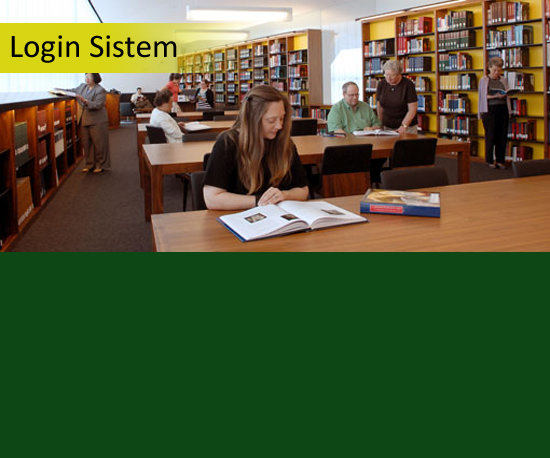
<style>
.page{position:relative;width:550px;height:458px;background:#0e4716}
.page>*{position:absolute;margin:0}
.t1{font:33.3px "Calibri";color:#000000}
</style>
<div class="page">
<p class="t1" style="left:11px;top:35px;width:166px;height:28px">Login Sistem</p>
</div>
